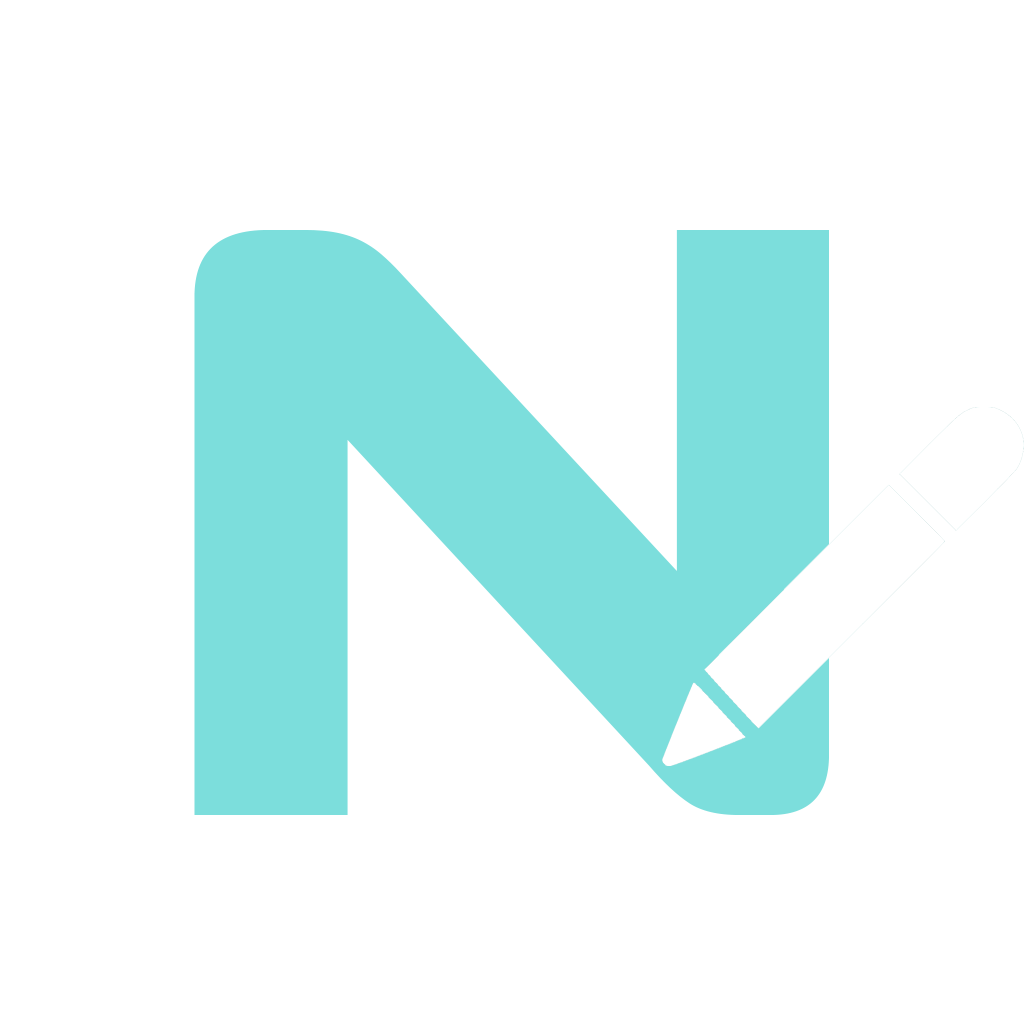
<style>
.page{position:relative;width:1024px;height:1024px;background:#ffffff}
.page>*{position:absolute;margin:0}
.t1{font:900px "GoodTimingRg-Bold";color:#7cdedc}
</style>
<div class="page">
<p class="t1" style="left:194px;top:230px;width:635px;height:585px">N</p>
</div>
